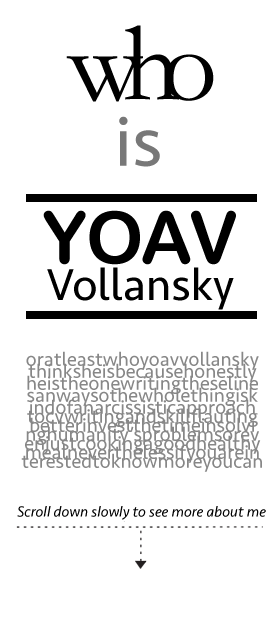
<style>
.page{position:relative;width:280px;height:640px;background:#ffffff}
.page>*{position:absolute;margin:0}
.t1{font:111px "STKaitiTC-Regular";letter-spacing:-0.18em;color:#000000}
.t2{font:72px "Seravek";color:#787878}
.t3{font:72px "ArialRoundedMTBold";color:#000000}
.t4{font:46px "Seravek";color:#000000}
.t5{font:20px/9px "Seravek";color:#878787}
.t6{font:20px/12px "Seravek";color:#878787}
.t7{font:15px "Seravek-Italic";color:#010101}
</style>
<div class="page">
<p class="t1" style="left:66px;top:25px;width:148px;height:77px">who</p>
<p class="t2" style="left:119px;top:116px;width:41px;height:51px">is</p>
<p class="t3" style="left:43px;top:210px;width:193px;height:55px">YOAV</p>
<p class="t4" style="left:47px;top:267px;width:187px;height:43px">Vollansky</p>
<p class="t5" style="left:21px;top:351px;width:241px;height:121px;text-align:center"><span class="t6">oratleastwhoyoavvollansky<br>thinksheisbecausehonestly<br>heistheonewritingtheseline<br>sanwaysothewholethingisk<br>indofa</span>narcissisticapproach<br>tocvwritingandskillflauting<br>betterinvestthetimeinsolvi<br>nghumanity’sproblemsorev<br>enjustcookingagoodhealthy<br>mealneverthelessifyouarein<br>terestedtoknowmoreyoucan</p>
<p class="t7" style="left:17px;top:506px;width:249px;height:14px">Scroll down slowly to see more about me</p>
</div>
